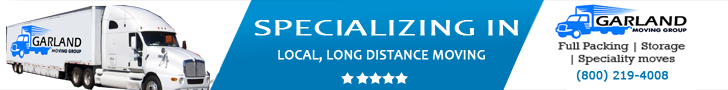
<style>
.page{position:relative;width:728px;height:90px;background:#ffffff}
.page>*{position:absolute;margin:0}
.t1{font:23.1px "Candara";color:#ffffff;text-transform:uppercase;font-weight:bold;scale:1.56 1}
.t2{font:14px "Candara";color:#ffffff;text-transform:uppercase;font-weight:bold}
.t3{font:10.9px "Verdana";color:#0078b6;text-transform:uppercase;font-weight:bold}
</style>
<div class="page">
<p class="t1" style="left:254px;top:20px;width:264px;height:16px">Specializing IN</p>
<p class="t2" style="left:278px;top:50px;width:207px;height:13px">Local, LONG Distance Moving</p>
<p class="t3" style="left:576px;top:70px;width:92px;height:12px">(800) 219-4008</p>
</div>
